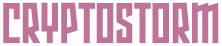
<style>
.page{position:relative;width:222px;height:46px;background:#bf7399}
.page>*{position:absolute;margin:0}
.t1{font:55px "ArmorPiercing20BB";color:#bf7399}
</style>
<div class="page">
<p class="t1" style="left:3px;top:2px;width:216px;height:41px">CRYPTOSTORM</p>
</div>
